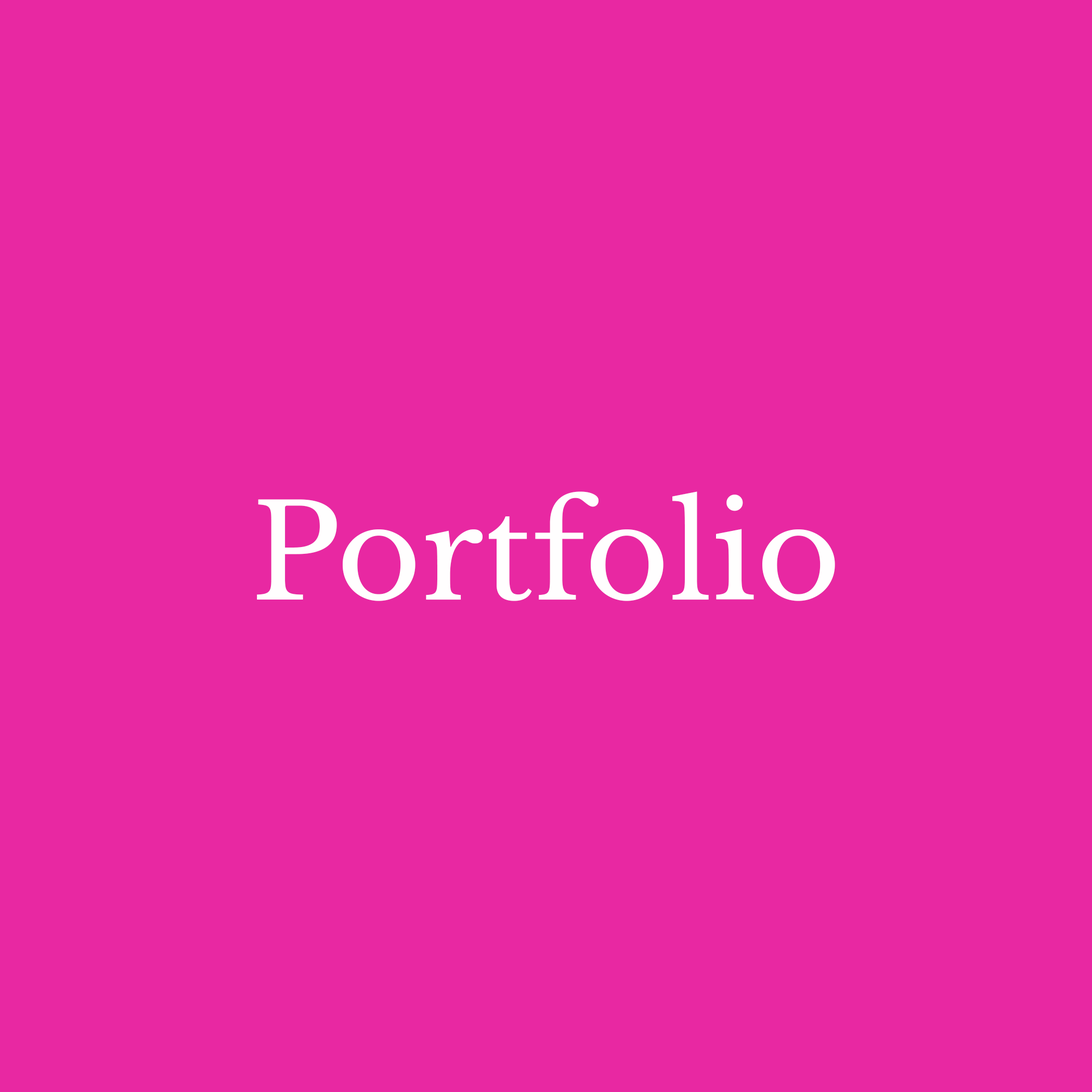
<style>
.page{position:relative;width:1092px;height:1092px;background:#e828a2}
.page>*{position:absolute;margin:0}
.t1{font:130px "LibreBaskerville-Regular";color:#fffefe}
</style>
<div class="page">
<p class="t1" style="left:257px;top:491px;width:578px;height:110px">Portfolio</p>
</div>
